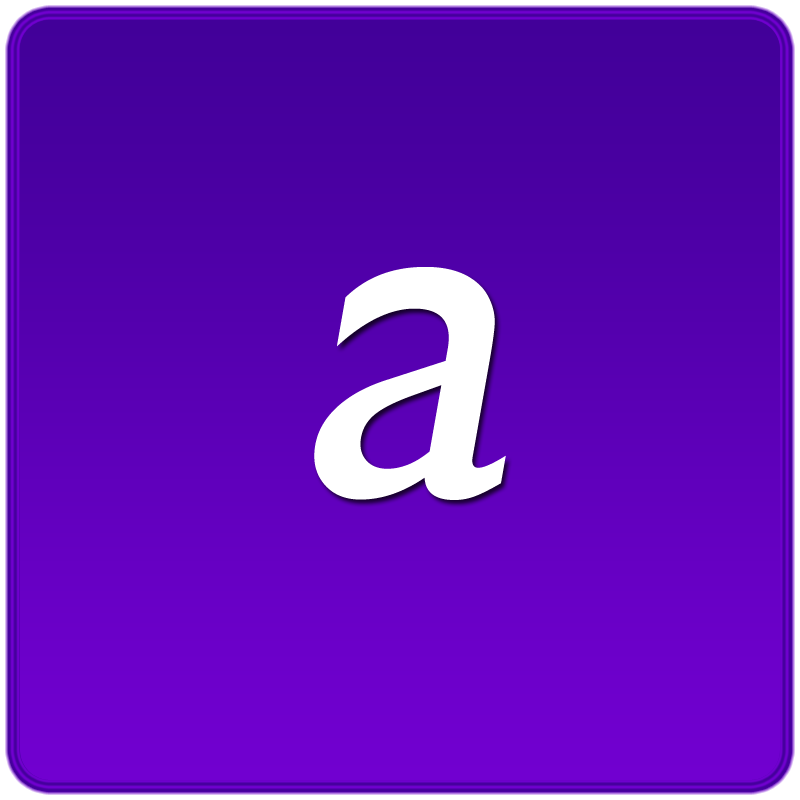
<style>
.page{position:relative;width:800px;height:800px}
.page>*{position:absolute;margin:0}
.t1{font:500px "GillSansMT";letter-spacing:0.075em;color:#ffffff;font-style:italic}
</style>
<div class="page">
<p class="t1" style="left:314px;top:267px;width:192px;height:233px">a</p>
</div>
